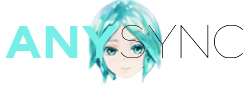
<style>
.page{position:relative;width:250px;height:85px;background:#ffffff}
.page>*{position:absolute;margin:0}
.t1{font:41.7px "TYPOGRAPHPRO-UltraLight";color:#000000}
.t2{font:41.7px "TYPOGRAPHPRO-ExtraBold";color:#77efe8}
</style>
<div class="page">
<p class="t1" style="left:5px;top:25px;width:238px;height:33px"><span class="t2">ANY</span>SYNC</p>
</div>
